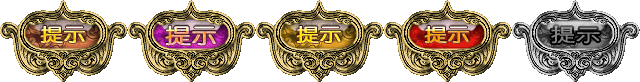
<style>
.page{position:relative;width:640px;height:82px;background:#ffffff}
.page>*{position:absolute;margin:0}
.t1{font:18.4px "STXihei";color:#868585;font-weight:bold;scale:1.34 1}
</style>
<div class="page">
<p class="t1" style="left:551px;top:26px;width:49px;height:18px">提示</p>
</div>
